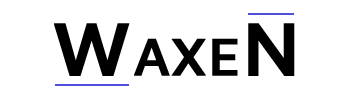
<style>
.page{position:relative;width:350px;height:100px;background:#ffffff}
.page>*{position:absolute;margin:0}
.t1{font:77.6px "MavenPro-Medium";letter-spacing:0.02em;color:#000000;font-variant:small-caps;font-weight:bold}
</style>
<div class="page">
<p class="t1" style="left:54px;top:23px;width:241px;height:53px">WaxeN</p>
</div>
